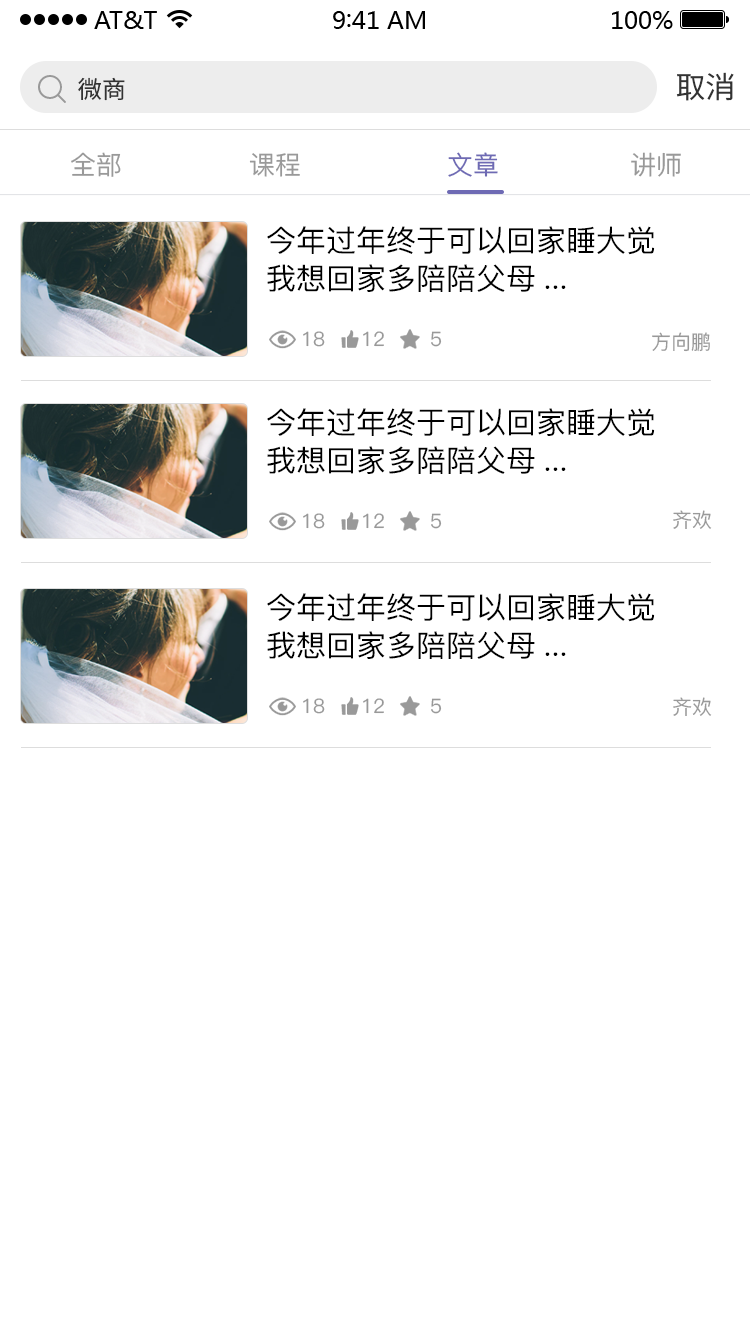
<style>
.page{position:relative;width:750px;height:1344px;background:#ffffff}
.page>*{position:absolute;margin:0}
.t1{font:24px "SourceHanSansCN-Regular";color:#333333}
.t2{font:30px "SourceHanSansCN-Regular";color:#333333}
.t3{font:26px "PingFang-SC-Medium";color:#999999}
.t4{font:26px "PingFang-SC-Medium";color:#6e6ab4}
.t5{font:30px/38px "PingFang-SC-Medium";color:#000000}
.t6{font:20px "PingFang-SC-Medium";color:#999999}
</style>
<div class="page">
<p class="t1" style="left:78px;top:77px;width:47px;height:24px">微商</p>
<p class="t2" style="left:676px;top:72px;width:58px;height:29px">取消</p>
<p class="t3" style="left:71px;top:152px;width:50px;height:25px">全部</p>
<p class="t3" style="left:249px;top:153px;width:51px;height:24px">课程</p>
<p class="t4" style="left:448px;top:152px;width:50px;height:25px">文章</p>
<p class="t3" style="left:631px;top:152px;width:50px;height:25px">讲师</p>
<p class="t5" style="left:267px;top:226px;width:388px;height:66px">今年过年终于可以回家睡大觉<br>我想回家多陪陪父母...</p>
<p class="t6" style="left:303px;top:331px;width:22px;height:16px">18</p>
<p class="t6" style="left:363px;top:331px;width:21px;height:16px">12</p>
<p class="t6" style="left:431px;top:331px;width:11px;height:16px">5</p>
<p class="t6" style="left:652px;top:332px;width:58px;height:20px">方向鹏</p>
<p class="t5" style="left:267px;top:408px;width:388px;height:66px">今年过年终于可以回家睡大觉<br>我想回家多陪陪父母...</p>
<p class="t6" style="left:673px;top:510px;width:39px;height:19px">齐欢</p>
<p class="t6" style="left:303px;top:513px;width:22px;height:16px">18</p>
<p class="t6" style="left:363px;top:513px;width:21px;height:16px">12</p>
<p class="t6" style="left:431px;top:513px;width:11px;height:16px">5</p>
<p class="t5" style="left:267px;top:593px;width:388px;height:66px">今年过年终于可以回家睡大觉<br>我想回家多陪陪父母...</p>
<p class="t6" style="left:303px;top:698px;width:22px;height:16px">18</p>
<p class="t6" style="left:363px;top:698px;width:21px;height:16px">12</p>
<p class="t6" style="left:431px;top:698px;width:11px;height:16px">5</p>
<p class="t6" style="left:673px;top:697px;width:39px;height:19px">齐欢</p>
</div>
